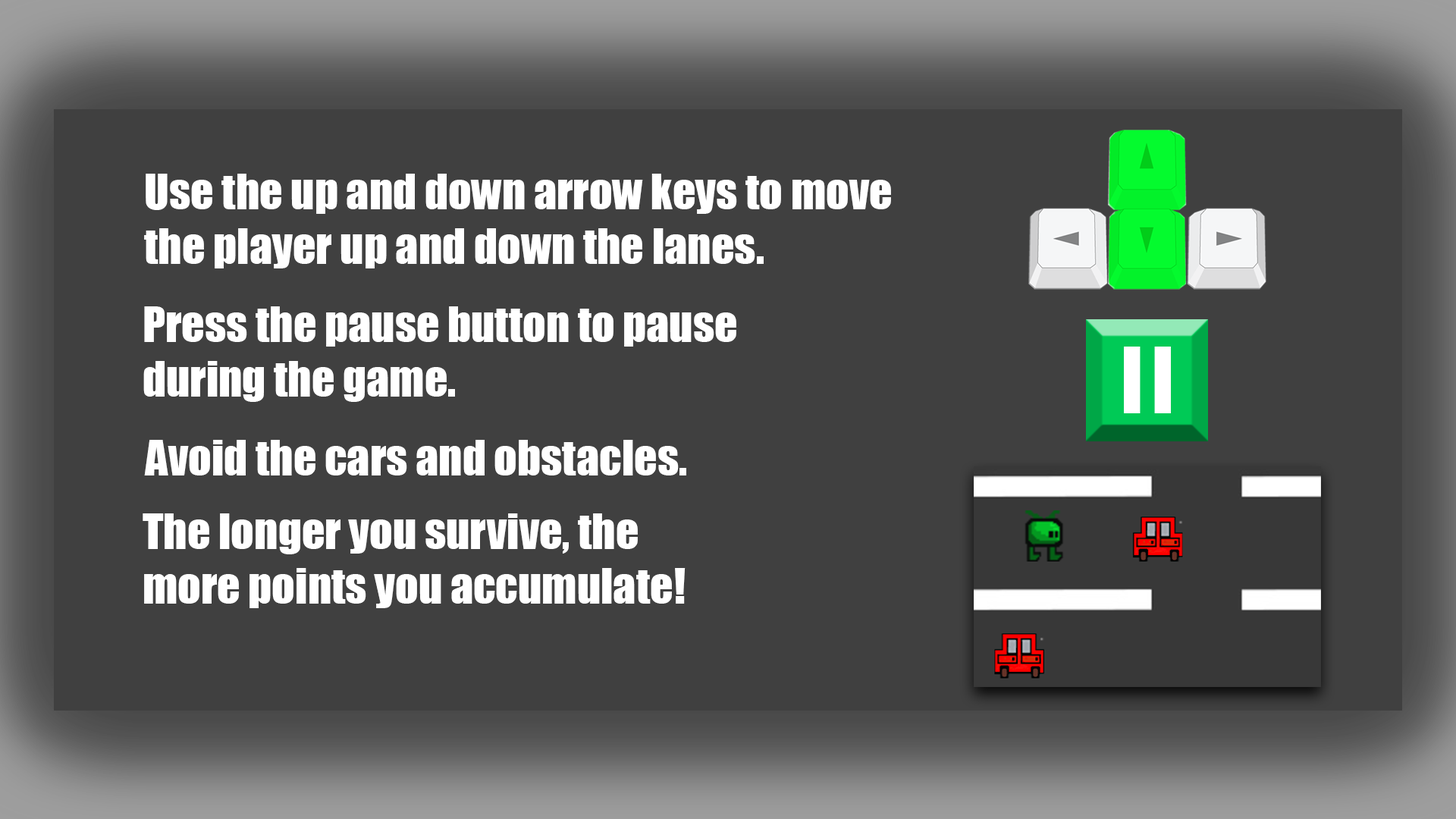
<style>
.page{position:relative;width:1456px;height:819px;background:#404040}
.page>*{position:absolute;margin:0}
.t1{font:45.5px "Impact";color:#ffffff}
</style>
<div class="page">
<p class="t1" style="left:144px;top:174px;width:747px;height:94px">Use the up and down arrow keys to move <br>the player up and down the lanes.</p>
<p class="t1" style="left:143px;top:306px;width:593px;height:96px">Press the pause button to pause<br>during the game.</p>
<p class="t1" style="left:144px;top:440px;width:542px;height:35px">Avoid the cars and obstacles.</p>
<p class="t1" style="left:143px;top:513px;width:543px;height:95px">The longer you survive, the <br>more points you accumulate!</p>
</div>
